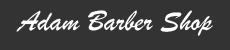
<style>
.page{position:relative;width:230px;height:50px;background:#333333}
.page>*{position:absolute;margin:0}
.t1{font:30px "BrushScriptMT";color:#ffffff}
</style>
<div class="page">
<p class="t1" style="left:16px;top:10px;width:197px;height:26px">Adam Barber Shop</p>
</div>
